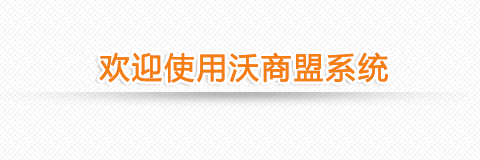
<style>
.page{position:relative;width:480px;height:160px;background:#f0f0f0}
.page>*{position:absolute;margin:0}
.t1{font:30px "MicrosoftYaHei";letter-spacing:0.05em;color:#f47e12;font-weight:bold}
</style>
<div class="page">
<p class="t1" style="left:99px;top:52px;width:289px;height:31px">欢迎使用沃商盟系统</p>
<p class="t1" style="left:99px;top:52px;width:289px;height:31px">欢迎使用沃商盟系统</p>
</div>
